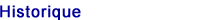
<style>
.page{position:relative;width:205px;height:20px;background:#ffffff}
.page>*{position:absolute;margin:0}
.t1{font:16px "ArialMT";letter-spacing:0.04em;color:#000099;font-weight:bold}
</style>
<div class="page">
<p class="t1" style="left:0px;top:5px;width:81px;height:16px">Historique</p>
</div>
